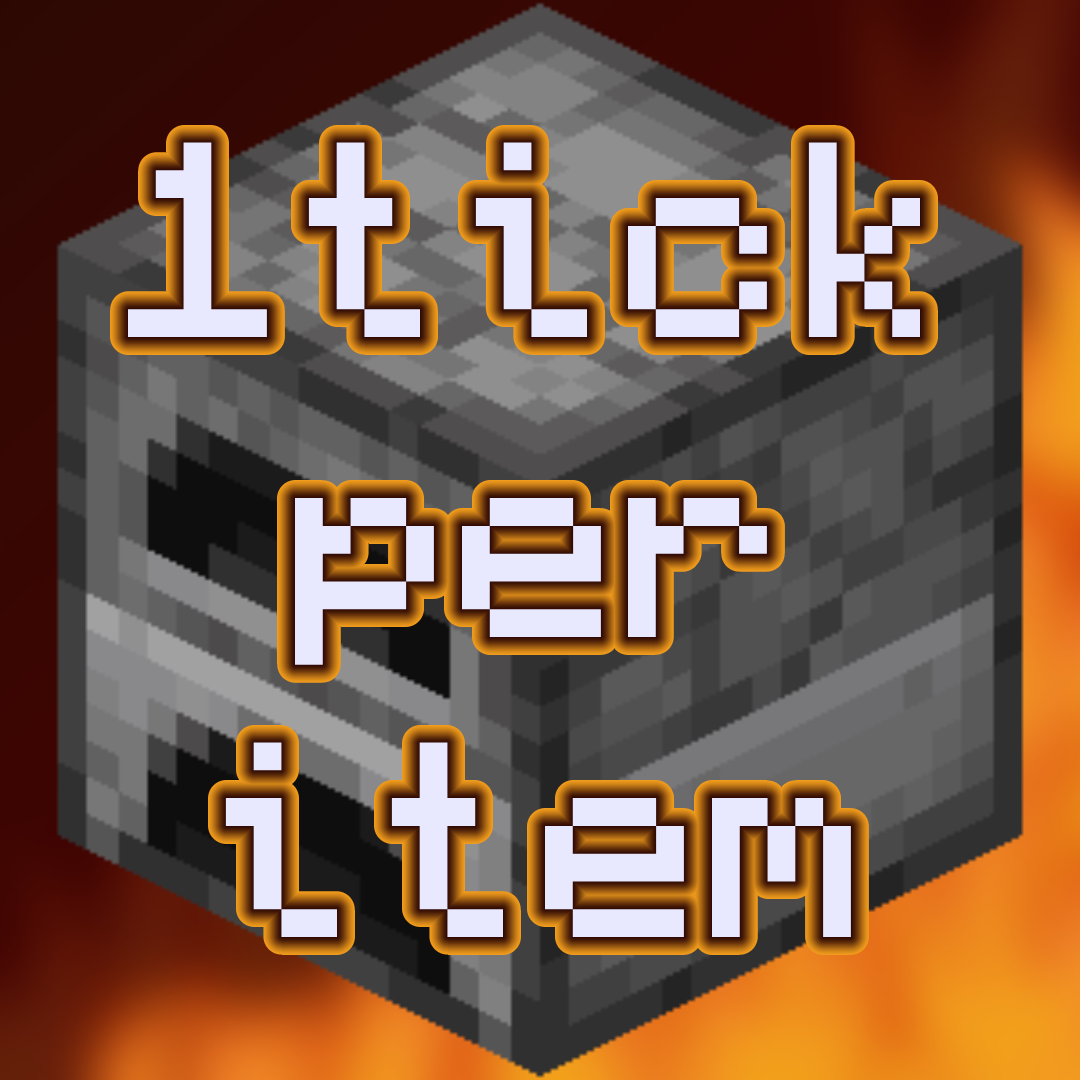
<style>
.page{position:relative;width:1080px;height:1080px}
.page>*{position:absolute;margin:0}
.t1{font:250px "Monocraft";color:#e8e8fe}
</style>
<div class="page">
<p class="t1" style="left:128px;top:142px;width:792px;height:795px;text-align:center">1tick<br>per<br>item</p>
</div>
